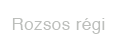
<style>
.page{position:relative;width:121px;height:47px;background:#ffffff}
.page>*{position:absolute;margin:0}
.t1{font:16.9px "Helvetica";letter-spacing:0.025em;color:#bdbfbc}
</style>
<div class="page">
<p class="t1" style="left:12px;top:18px;width:93px;height:16px">Rozsos régi</p>
</div>
